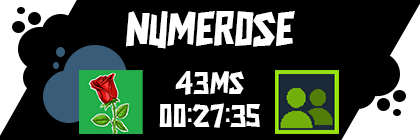
<style>
.page{position:relative;width:420px;height:140px;background:#000000}
.page>*{position:absolute;margin:0}
.t1{font:50px "CIKANDEI";color:#ffffff}
.t2{font:33.3px "CIKANDEI";color:#ffffff}
</style>
<div class="page">
<p class="t1" style="left:126px;top:11px;width:169px;height:38px">NUMEROSE</p>
<p class="t2" style="left:175px;top:71px;width:69px;height:24px">43ms</p>
<p class="t2" style="left:159px;top:103px;width:101px;height:25px">00:27:35</p>
</div>
